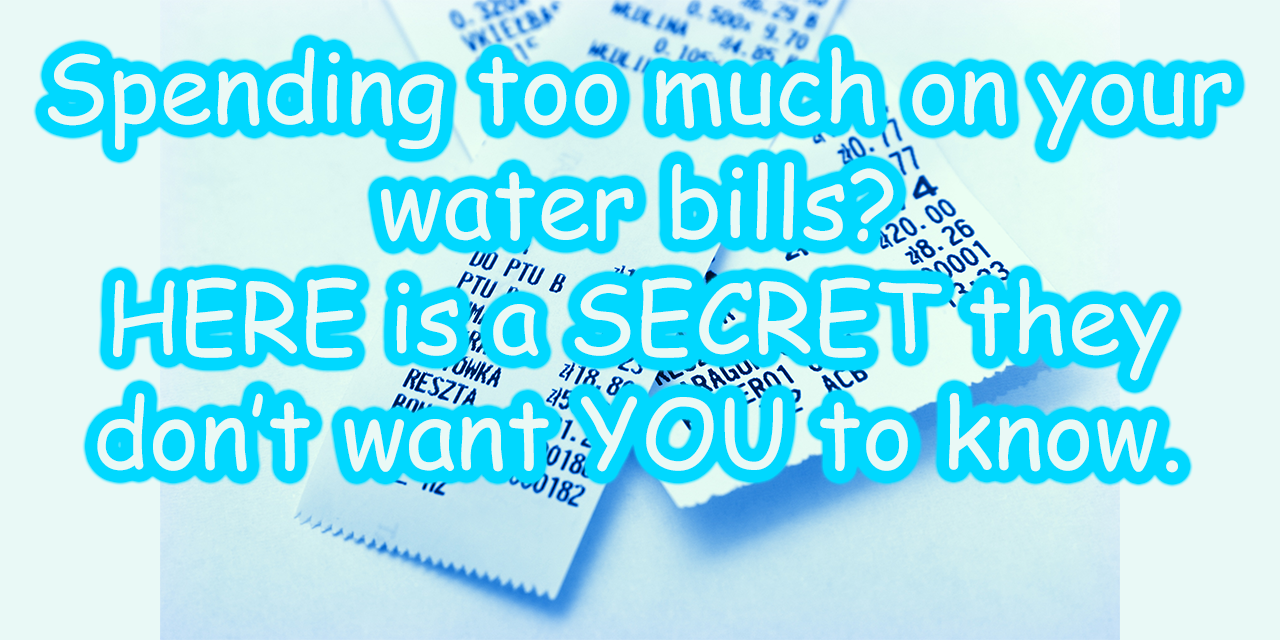
<style>
.page{position:relative;width:1280px;height:640px;background:#e9f9f6}
.page>*{position:absolute;margin:0}
.t1{font:96px "ComicSansMS";color:#e9f9f6}
</style>
<div class="page">
<p class="t1" style="left:48px;top:47px;width:1184px;height:426px;text-align:center">Spending too much on your<br>water bills?<br>HERE is a SECRET they<br>don’t want YOU to know.</p>
</div>
